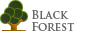
<style>
.page{position:relative;width:110px;height:32px;background:#ffffff}
.page>*{position:absolute;margin:0}
.t1{font:11px/12px "TrajanPro-Bold";color:#686868}
</style>
<div class="page">
<p class="t1" style="left:32px;top:10px;width:42px;height:21px">Black<br>Forest</p>
</div>
